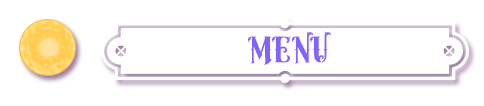
<style>
.page{position:relative;width:484px;height:106px;background:#ffffff}
.page>*{position:absolute;margin:0}
.t1{font:41.7px "Moyers";color:#8362ff}
</style>
<div class="page">
<p class="t1" style="left:248px;top:31px;width:83px;height:34px">MENU</p>
</div>
